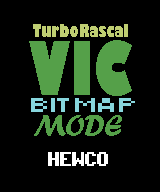
<style>
.page{position:relative;width:160px;height:192px;background:#000000}
.page>*{position:absolute;margin:0}
.t1{font:18px "GillSans-UltraBoldCondensed";color:#bfce72}
.t2{font:72px "GillSans-UltraBoldCondensed";color:#55a049}
.t3{font:20.8px "Small Fonts";color:#87d6dd;scale:1.4 1}
.t4{font:30px "ForteMT";color:#55a049}
.t5{font:16.1px "C64Pro";color:#ffffff;scale:0.86 1}
</style>
<div class="page">
<p class="t1" style="left:33px;top:24px;width:95px;height:13px">TurboRascal</p>
<p class="t2" style="left:29px;top:40px;width:103px;height:56px">VIC</p>
<p class="t3" style="left:31px;top:98px;width:104px;height:14px">BITMAP</p>
<p class="t4" style="left:34px;top:115px;width:88px;height:21px">MODE</p>
<p class="t5" style="left:48px;top:152px;width:60px;height:14px">HEWCO</p>
</div>
